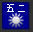
<style>
.page{position:relative;width:33px;height:32px;background:#000090}
.page>*{position:absolute;margin:0}
.t1{font:10.4px "SimSun";color:#ffffff}
</style>
<div class="page">
<p class="t1" style="left:7px;top:4px;width:18px;height:8px">五二</p>
</div>
